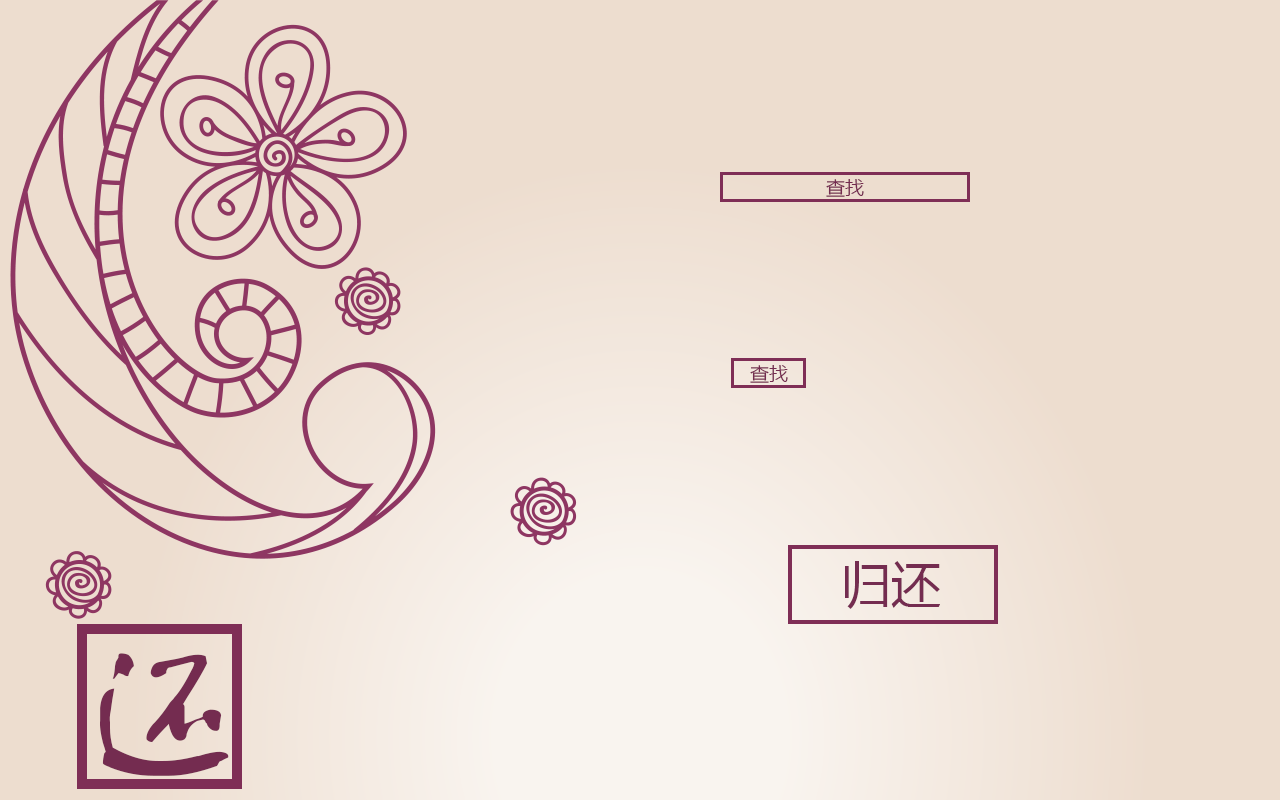
<style>
.page{position:relative;width:1280px;height:800px;background:#edddcf}
.page>*{position:absolute;margin:0}
.t1{font:19px "MicrosoftYaHei";color:#742c50}
.t2{font:50px "MicrosoftYaHei";color:#742c50}
.t3{font:180px "FZSTK--GBK1-0";color:#742c50}
</style>
<div class="page">
<p class="t1" style="left:826px;top:179px;width:38px;height:18px">查找</p>
<p class="t1" style="left:750px;top:365px;width:38px;height:18px">查找</p>
<p class="t2" style="left:845px;top:561px;width:95px;height:48px">归还</p>
<p class="t3" style="left:100px;top:653px;width:129px;height:123px">还</p>
</div>
